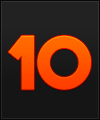
<style>
.page{position:relative;width:100px;height:120px;background:#151515}
.page>*{position:absolute;margin:0}
.t1{font:73px "TheBoldFont";color:#ff5700}
</style>
<div class="page">
<p class="t1" style="left:8px;top:35px;width:83px;height:55px">10</p>
</div>
